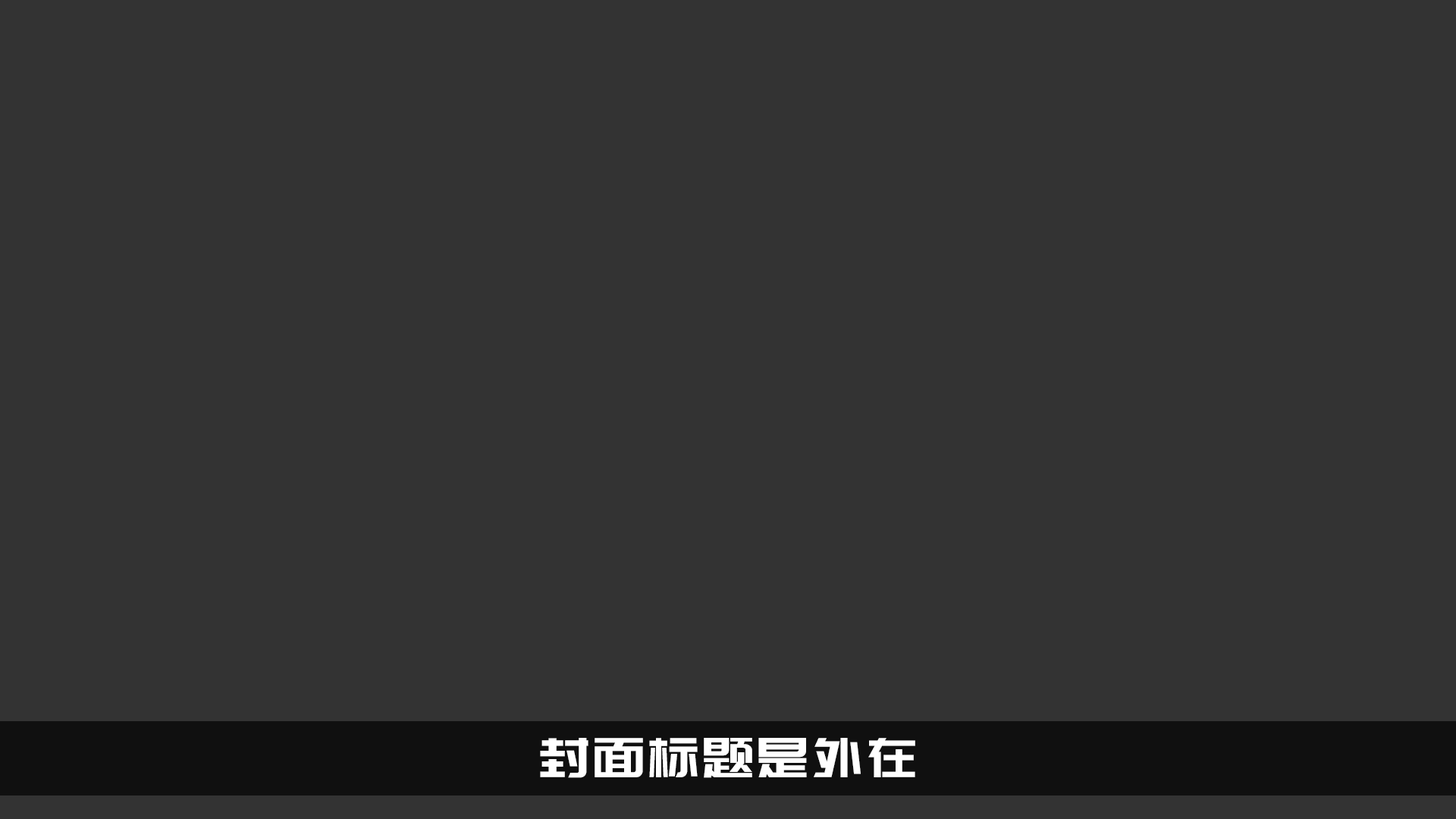
<style>
.page{position:relative;width:1456px;height:819px;background:#333333}
.page>*{position:absolute;margin:0}
.t1{font:54.6px "PangMenZhengDao-3";color:#ffffff}
</style>
<div class="page">
<p class="t1" style="left:540px;top:738px;width:375px;height:40px">封面标题是外在</p>
</div>
